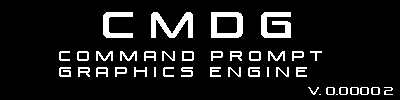
<style>
.page{position:relative;width:400px;height:100px;background:#000000}
.page>*{position:absolute;margin:0}
.t1{font:36px "VenusRising-Regular";color:#ffffff}
.t2{font:14px "VenusRising-Regular";color:#ffffff}
.t3{font:10px "VenusRising-Regular";color:#ffffff}
</style>
<div class="page">
<p class="t1" style="left:103px;top:12px;width:188px;height:26px">C M D G</p>
<p class="t2" style="left:59px;top:51px;width:263px;height:26px">C o m m a n d   p r o m p t<br>g r a p h i c s   e n g i n e</p>
<p class="t3" style="left:308px;top:87px;width:85px;height:8px">v. 0.0000 2</p>
</div>
